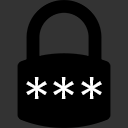
<style>
.page{position:relative;width:128px;height:128px;background:#333333}
.page>*{position:absolute;margin:0}
.t1{font:75px "ProximaNova-Regular";letter-spacing:0.025em;color:#ffffff}
</style>
<div class="page">
<p class="t1" style="left:26px;top:77px;width:76px;height:22px">***</p>
</div>
